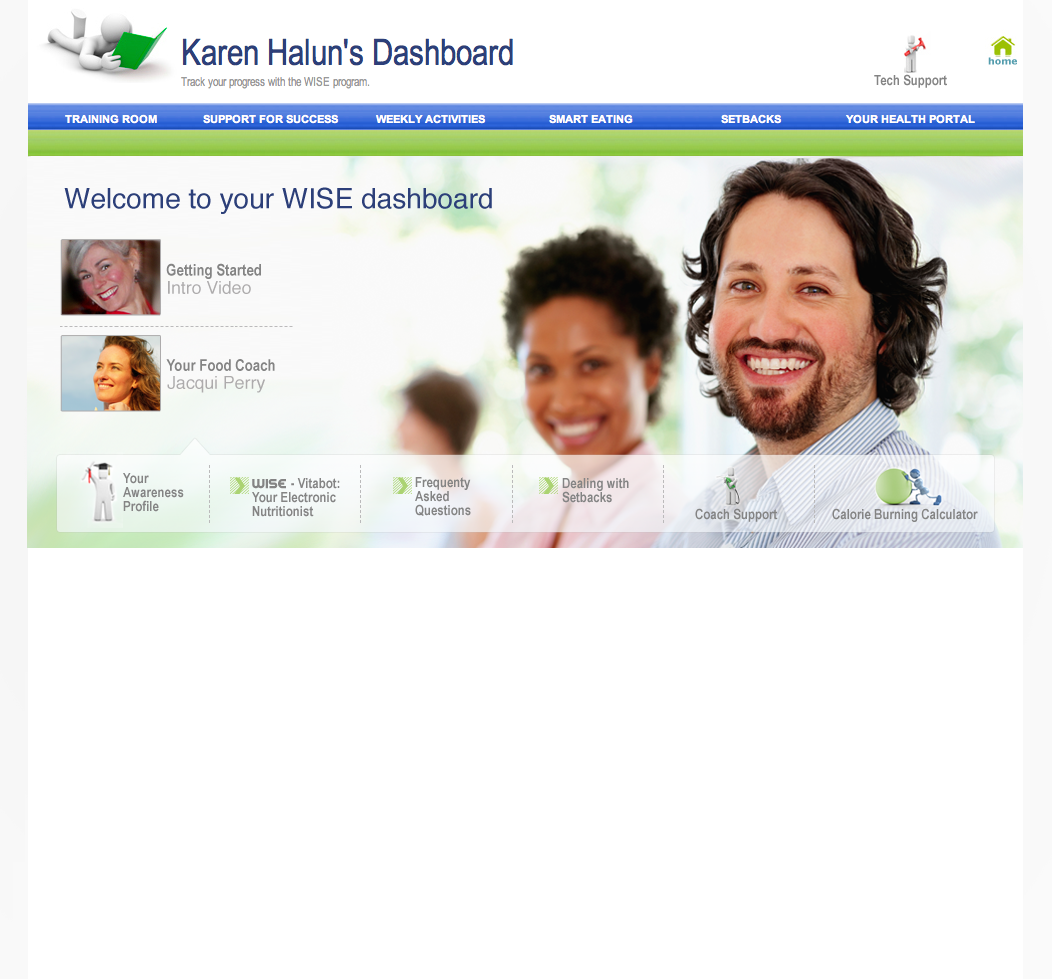
<style>
.page{position:relative;width:1052px;height:979px;background:#ffffff}
.page>*{position:absolute;margin:0}
.t1{font:14px "ArialNarrow-Bold";color:#848484}
.t2{font:28px "Helvetica";color:#2c3f79}
.t3{font:16px "ArialNarrow-Bold";letter-spacing:0.003em;color:#848484}
.t4{font:17.6px "Helvetica";color:#adabac}
.t5{font:14px/14px "ArialNarrow-Bold";letter-spacing:0.003em;color:#848484}
.t6{font:14px/14px "ArialNarrow-Bold";color:#848484}
.t7{font:14px/14px "SpinCycle";color:#848484}
</style>
<div class="page">
<p class="t1" style="left:874px;top:74px;width:73px;height:14px">Tech Support</p>
<p class="t2" style="left:64px;top:187px;width:428px;height:27px">Welcome to your WISE dashboard</p>
<p class="t3" style="left:166px;top:263px;width:95px;height:16px">Getting Started</p>
<p class="t4" style="left:168px;top:281px;width:83px;height:13px">Intro Video</p>
<p class="t3" style="left:166px;top:359px;width:109px;height:12px">Your Food Coach</p>
<p class="t4" style="left:167px;top:376px;width:98px;height:17px">Jacqui Perry</p>
<p class="t5" style="left:123px;top:473px;width:61px;height:39px">Your <br>Awareness <br>Profile</p>
<p class="t6" style="left:252px;top:478px;width:88px;height:39px"><span class="t7">WISE </span>- Vitabot:<br>Your Electronic <br>Nutritionist</p>
<p class="t6" style="left:415px;top:477px;width:56px;height:39px">Frequenty <br>Asked <br>Questions</p>
<p class="t6" style="left:562px;top:478px;width:67px;height:25px">Dealing with<br>Setbacks</p>
<p class="t1" style="left:695px;top:508px;width:83px;height:14px">Coach Support</p>
<p class="t1" style="left:832px;top:508px;width:146px;height:14px">Calorie Burning Calculator</p>
</div>
